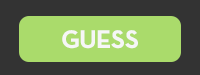
<style>
.page{position:relative;width:200px;height:75px;background:#333333}
.page>*{position:absolute;margin:0}
.t1{font:26px "NeutraText-Bold";letter-spacing:-0.027em;color:#f6f6f6}
</style>
<div class="page">
<p class="t1" style="left:62px;top:30px;width:76px;height:19px">GUESS</p>
</div>
